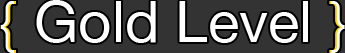
<style>
.page{position:relative;width:345px;height:53px;background:#333333}
.page>*{position:absolute;margin:0}
.t1{font:56.7px "HelveticaNeue";color:#ffffff}
</style>
<div class="page">
<p class="t1" style="left:0px;top:0px;width:345px;height:53px">{ Gold Level }</p>
</div>
